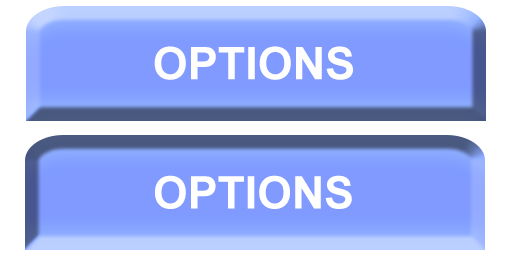
<style>
.page{position:relative;width:512px;height:256px;background:#ffffff}
.page>*{position:absolute;margin:0}
.t1{font:45px "Arial-BoldMT";color:#fffefe}
.t2{font:45px "Arial-BoldMT";color:#ffffff}
</style>
<div class="page">
<p class="t1" style="left:154px;top:46px;width:199px;height:34px">OPTIONS</p>
<p class="t2" style="left:155px;top:175px;width:197px;height:34px">OPTIONS</p>
</div>
